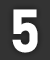
<style>
.page{position:relative;width:50px;height:60px;background:#333333}
.page>*{position:absolute;margin:0}
.t1{font:60px "Bahnschrift-Bold";color:#ffffff}
</style>
<div class="page">
<p class="t1" style="left:12px;top:9px;width:26px;height:44px">5</p>
</div>
